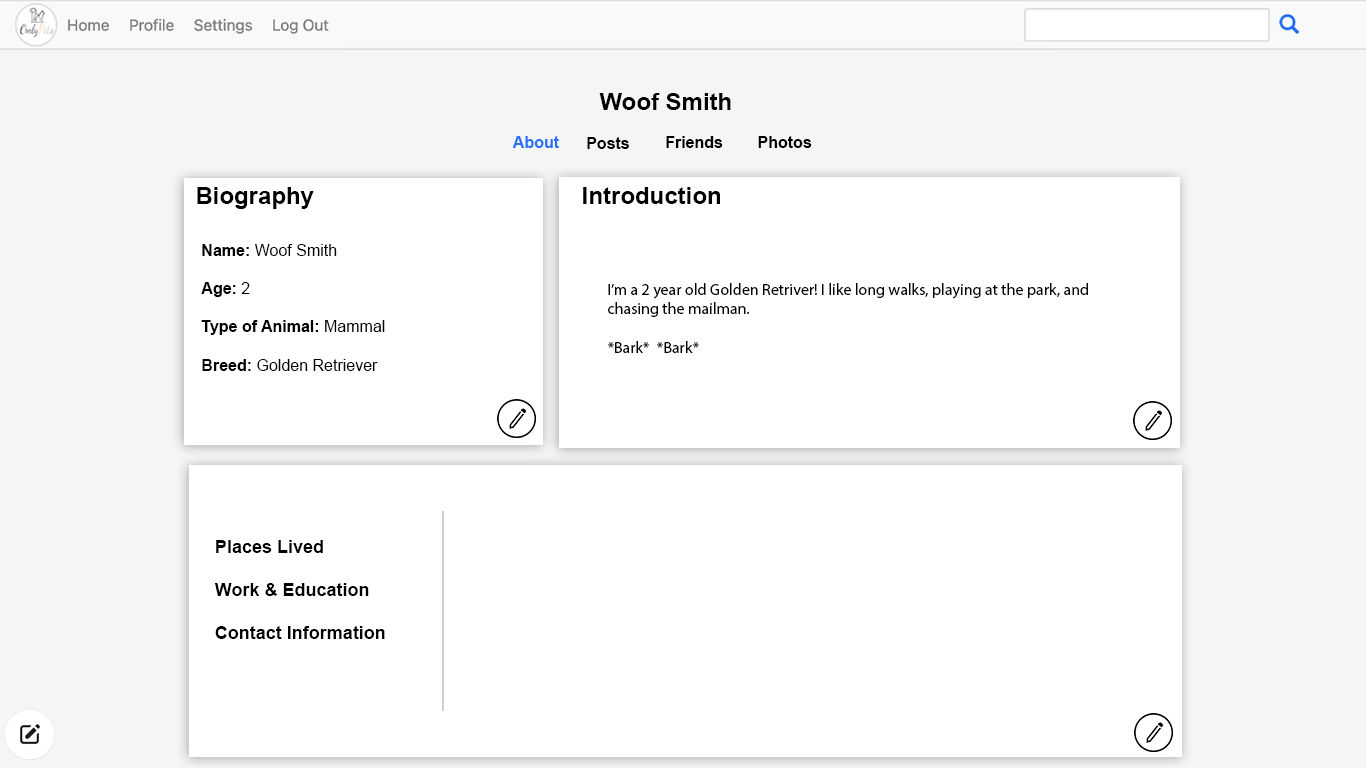
<style>
.page{position:relative;width:1366px;height:768px;background:#ffffff}
.page>*{position:absolute;margin:0}
.t1{font:24px "Arial-BoldMT";color:#000000}
.t2{font:16px "Arial-BoldMT";color:#2870f4}
.t3{font:16px "Arial-BoldMT";color:#000000}
.t4{font:16px "ArialMT";color:#000000}
.t5{font:16px "MyriadPro-Regular";color:#000000}
.t6{font:18px "Arial-BoldMT";color:#000000}
</style>
<div class="page">
<p class="t1" style="left:599px;top:93px;width:132px;height:17px">Woof Smith</p>
<p class="t2" style="left:512px;top:136px;width:47px;height:12px">About</p>
<p class="t3" style="left:587px;top:137px;width:42px;height:12px">Posts</p>
<p class="t3" style="left:666px;top:136px;width:57px;height:12px">Friends</p>
<p class="t3" style="left:758px;top:136px;width:54px;height:12px">Photos</p>
<p class="t1" style="left:197px;top:187px;width:117px;height:22px">Biography</p>
<p class="t1" style="left:583px;top:187px;width:137px;height:17px">Introduction</p>
<p class="t4" style="left:201px;top:244px;width:184px;height:127px"><span class="t3">Name: </span>Woof Smith<br><br><span class="t3">Age:</span> 2<br><br><span class="t3">Type of Animal: </span>Mammal<br><br><span class="t3">Breed: </span>Golden Retriever</p>
<p class="t5" style="left:608px;top:283px;width:480px;height:70px">I’m a 2 year old Golden Retriver! I like long walks, playing at the park, and <br>chasing the mailman.<br><br>*Bark*  *Bark*</p>
<p class="t6" style="left:214px;top:540px;width:171px;height:99px">Places Lived<br><br>Work &amp; Education<br><br>Contact Information</p>
</div>
